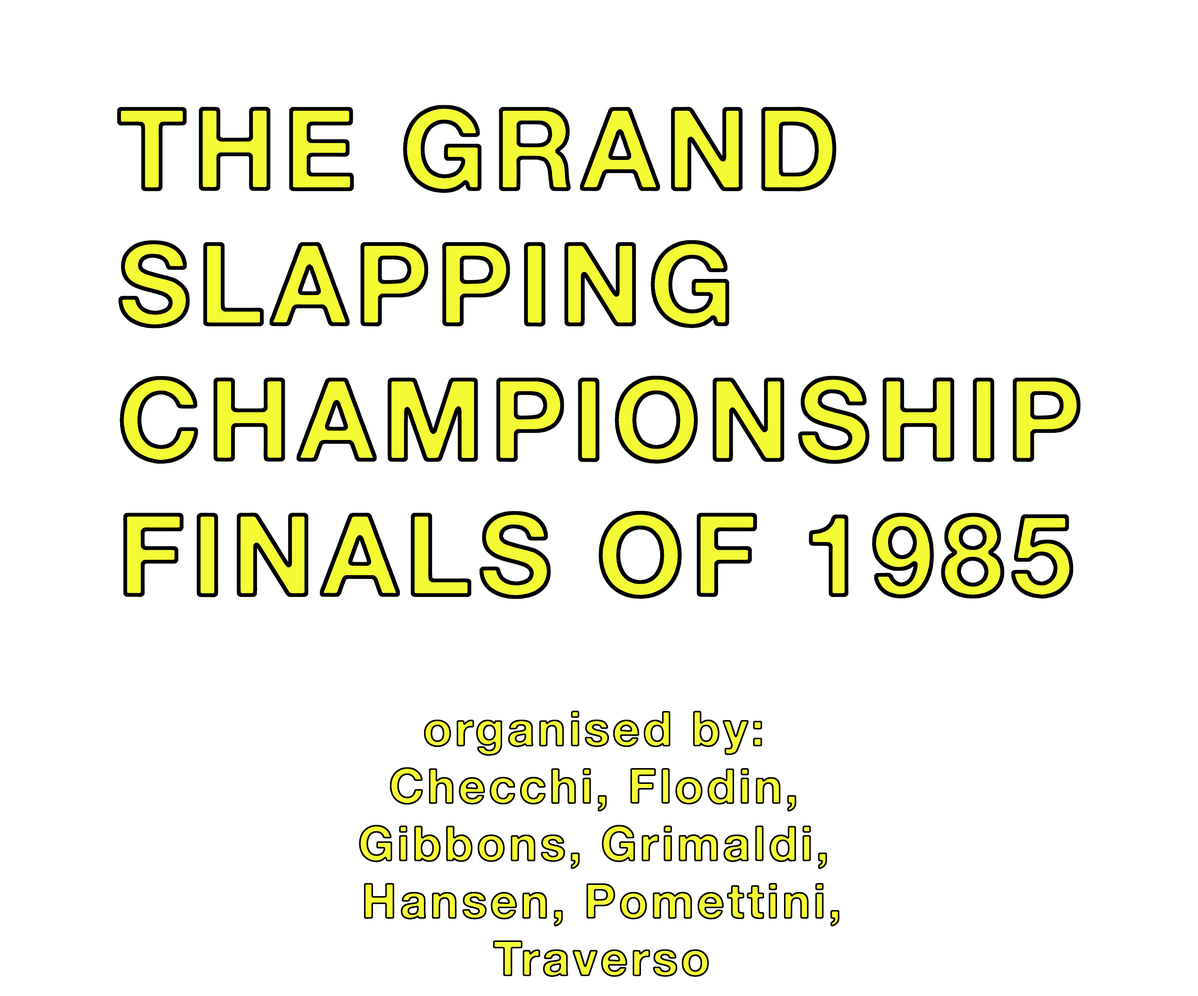
<style>
.page{position:relative;width:1198px;height:996px;background:#ffffff}
.page>*{position:absolute;margin:0}
.t1{font:112.6px "AlteHaasGrotesk_Bold";letter-spacing:0.06em;color:#f4fb35}
.t2{font:47.8px "AlteHaasGrotesk_Bold";letter-spacing:0.06em;color:#f4fb35}
</style>
<div class="page">
<p class="t1" style="left:119px;top:107px;width:959px;height:490px">THE GRAND<br>SLAPPING<br>CHAMPIONSHIP<br>FINALS OF 1985</p>
<p class="t2" style="left:359px;top:711px;width:479px;height:265px;text-align:center">organised by: <br>Checchi, Flodin, <br>Gibbons, Grimaldi, <br>Hansen, Pomettini,<br>Traverso</p>
</div>
